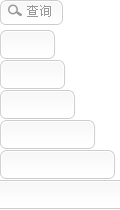
<style>
.page{position:relative;width:120px;height:210px;background:#ffffff}
.page>*{position:absolute;margin:0}
.t1{font:12px "SimSun";letter-spacing:0.1em;color:#999999}
</style>
<div class="page">
<p class="t1" style="left:27px;top:5px;width:24px;height:12px">查询</p>
</div>
